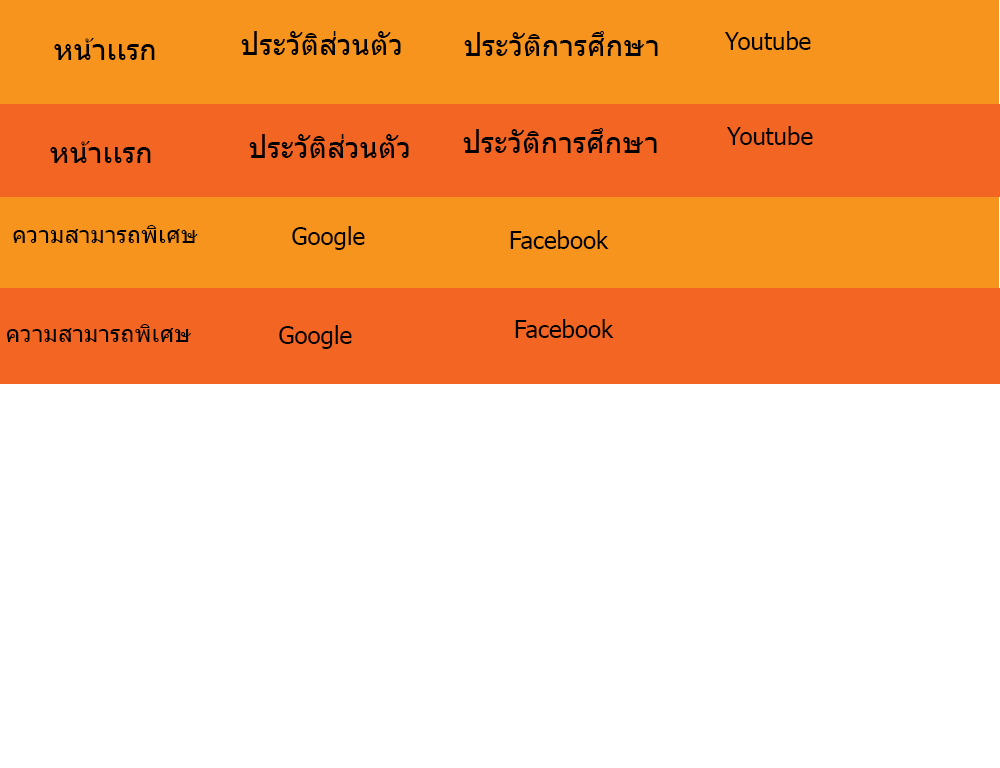
<style>
.page{position:relative;width:1000px;height:768px;background:#ffffff}
.page>*{position:absolute;margin:0}
.t1{font:30px "Tahoma";color:#000000}
.t2{font:24px "Tahoma";color:#000000}
</style>
<div class="page">
<p class="t1" style="left:54px;top:38px;width:101px;height:22px">หน้าเเรก</p>
<p class="t1" style="left:241px;top:31px;width:160px;height:24px">ประวัติส่วนตัว</p>
<p class="t1" style="left:464px;top:31px;width:194px;height:25px">ประวัติการศึกษา</p>
<p class="t2" style="left:725px;top:31px;width:86px;height:19px">Youtube</p>
<p class="t2" style="left:727px;top:126px;width:86px;height:19px">Youtube</p>
<p class="t1" style="left:249px;top:134px;width:160px;height:24px">ประวัติส่วนตัว</p>
<p class="t1" style="left:463px;top:128px;width:194px;height:25px">ประวัติการศึกษา</p>
<p class="t1" style="left:50px;top:141px;width:101px;height:22px">หน้าเเรก</p>
<p class="t2" style="left:13px;top:225px;width:185px;height:18px">ความสามารถพิเศษ</p>
<p class="t2" style="left:292px;top:226px;width:73px;height:24px">Google</p>
<p class="t2" style="left:510px;top:230px;width:99px;height:19px">Facebook</p>
<p class="t2" style="left:7px;top:324px;width:184px;height:18px">ความสามารถพิเศษ</p>
<p class="t2" style="left:279px;top:325px;width:73px;height:24px">Google</p>
<p class="t2" style="left:515px;top:319px;width:99px;height:19px">Facebook</p>
</div>
